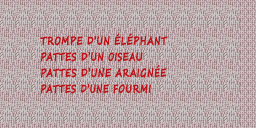
<style>
.page{position:relative;width:256px;height:128px;background:#cec6c6}
.page>*{position:absolute;margin:0}
.t1{font:11.2px/16px "SegoeScript-Bold";letter-spacing:0.05em;color:#bd1018;text-transform:uppercase;font-weight:bold;scale:0.7 1}
.t2{font:11.2px/16px "SegoeScript-Bold";letter-spacing:0.05em;color:#bd1018;text-transform:uppercase;font-weight:bold;scale:0.76 1}
.t3{font:11.2px/16px "SegoeScript-Bold";letter-spacing:0.05em;color:#bd1018;text-transform:uppercase;font-weight:bold;scale:0.66 1}
.t4{font:11.2px/16px "SegoeScript-Bold";letter-spacing:0.05em;color:#bd1018;text-transform:uppercase;font-weight:bold;scale:0.79 1}
.t5{font:11.2px/16px "SegoeScript-Bold";letter-spacing:0.05em;color:#bd1018;text-transform:uppercase;font-weight:bold;scale:0.71 1}
.t6{font:11.2px/16px "SegoeScript-Bold";letter-spacing:0.05em;color:#bd1018;text-transform:uppercase;font-weight:bold;scale:0.69 1}
.t7{font:11.2px/16px "SegoeScript-Bold";letter-spacing:0.05em;color:#bd1018;text-transform:uppercase;font-weight:bold;scale:0.72 1}
</style>
<div class="page">
<p class="t1" style="left:40px;top:33px;width:128px;height:61px"><span class="t2">T</span>rompe d’un éléphant<br>Pattes d’un <span class="t3">oisea</span><span class="t4">u<br></span>Pattes <span class="t5">d’un</span>e araignée<br><span class="t6">Pattes </span><span class="t3">d’une</span><span class="t7"> fourmi</span></p>
</div>
